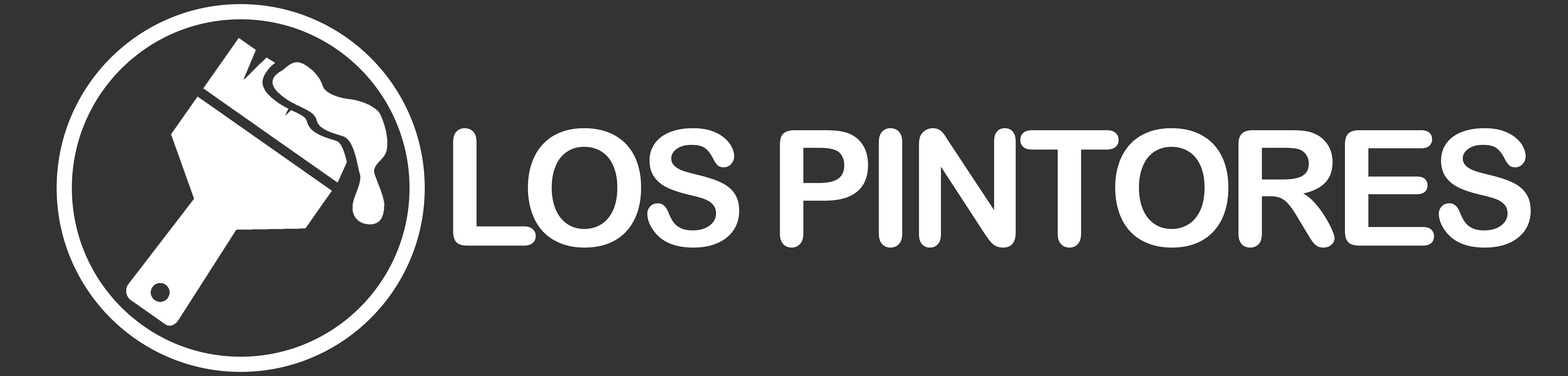
<style>
.page{position:relative;width:1568px;height:376px;background:#333333}
.page>*{position:absolute;margin:0}
.t1{font:161.3px "ArialRoundedMTBold";letter-spacing:-0.06em;color:#ffffff}
</style>
<div class="page">
<p class="t1" style="left:453px;top:128px;width:1078px;height:120px">LOS PINTORES</p>
</div>
